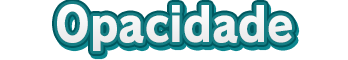
<style>
.page{position:relative;width:348px;height:60px;background:#ffffff}
.page>*{position:absolute;margin:0}
.t1{font:46.9px "RodinPro-EB";letter-spacing:0.002em;color:#f2f2f3;scale:0.91 1}
</style>
<div class="page">
<p class="t1" style="left:57px;top:4px;width:235px;height:47px">Opacidade</p>
</div>
